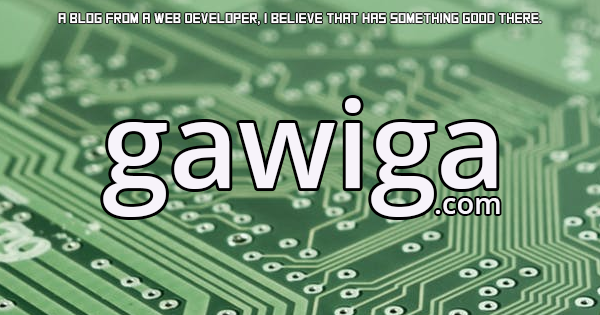
<style>
.page{position:relative;width:600px;height:315px}
.page>*{position:absolute;margin:0}
.t1{font:14px "SquareFont";color:#ffffff}
.t2{font:120px "OpenSans-SemiBold";color:#f7f3fa}
.t3{font:29px "OpenSans-SemiBold";color:#f7f3fa}
</style>
<div class="page">
<p class="t1" style="left:58px;top:13px;width:484px;height:12px">a blog from a web developer, i believe that has something good there.</p>
<p class="t2" style="left:103px;top:98px;width:394px;height:119px">gawiga</p>
<p class="t3" style="left:435px;top:198px;width:65px;height:16px">.com</p>
</div>
